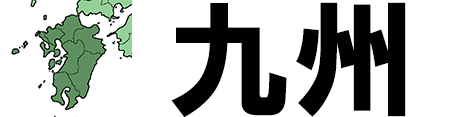
<style>
.page{position:relative;width:458px;height:117px;background:#ffffff}
.page>*{position:absolute;margin:0}
.t1{font:125px "HGPSoeiKakugothicUB";color:#030000}
</style>
<div class="page">
<p class="t1" style="left:171px;top:2px;width:235px;height:116px">九州</p>
</div>
